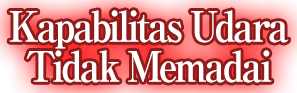
<style>
.page{position:relative;width:297px;height:93px;background:#911a1a}
.page>*{position:absolute;margin:0}
.t1{font:42px/40px "RyuminPro-ExBold";letter-spacing:-0.08em;color:#ffffff;scale:0.9 1}
</style>
<div class="page">
<p class="t1" style="left:9px;top:10px;width:280px;height:73px;text-align:center">Kapabilitas Udara<br>Tidak Memadai</p>
</div>
